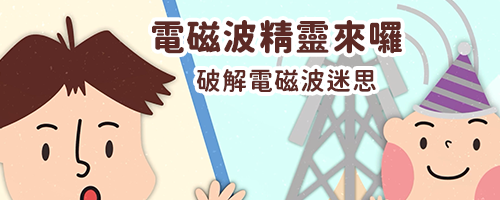
<style>
.page{position:relative;width:500px;height:200px}
.page>*{position:absolute;margin:0}
.t1{font:35px "GenSenMaruGothicTW-Heavy-TTF";letter-spacing:0.04em;color:#5d2a25}
.t2{font:25px "GenSenMaruGothicTW-Bold-TTF";letter-spacing:0.04em;color:#5d2a25}
</style>
<div class="page">
<p class="t1" style="left:152px;top:20px;width:250px;height:34px">電磁波精靈來囉</p>
<p class="t2" style="left:197px;top:68px;width:179px;height:24px">破解電磁波迷思</p>
</div>
